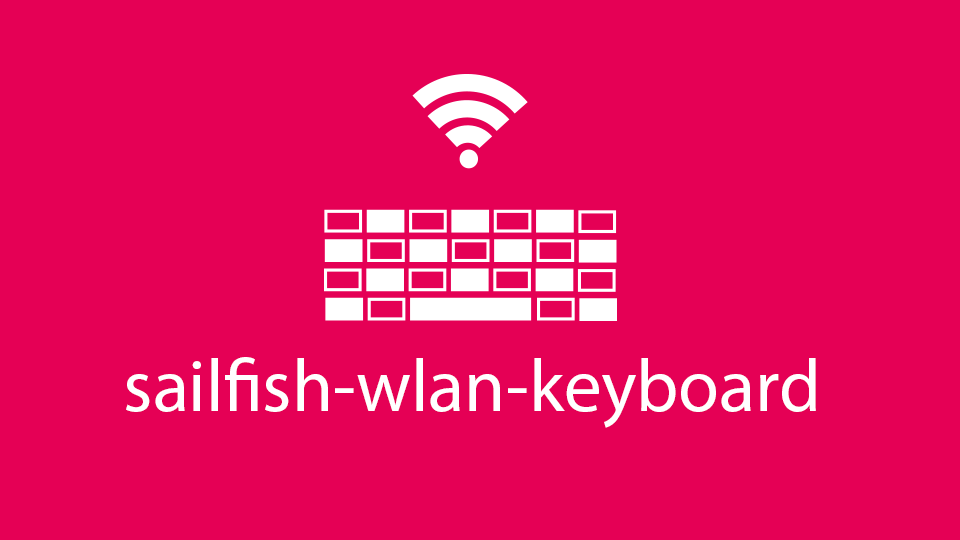
<style>
.page{position:relative;width:960px;height:540px;background:#e50055}
.page>*{position:absolute;margin:0}
.t1{font:74.5px "MyriadPro-Regular";color:#ffffff}
</style>
<div class="page">
<p class="t1" style="left:126px;top:357px;width:690px;height:71px">sailfish-wlan-keyboard</p>
</div>
